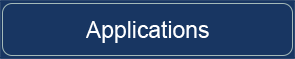
<style>
.page{position:relative;width:295px;height:59px;background:#183662}
.page>*{position:absolute;margin:0}
.t1{font:22.9px "ArialMT";color:#ffffff}
</style>
<div class="page">
<p class="t1" style="left:86px;top:21px;width:123px;height:22px">Applications</p>
</div>
